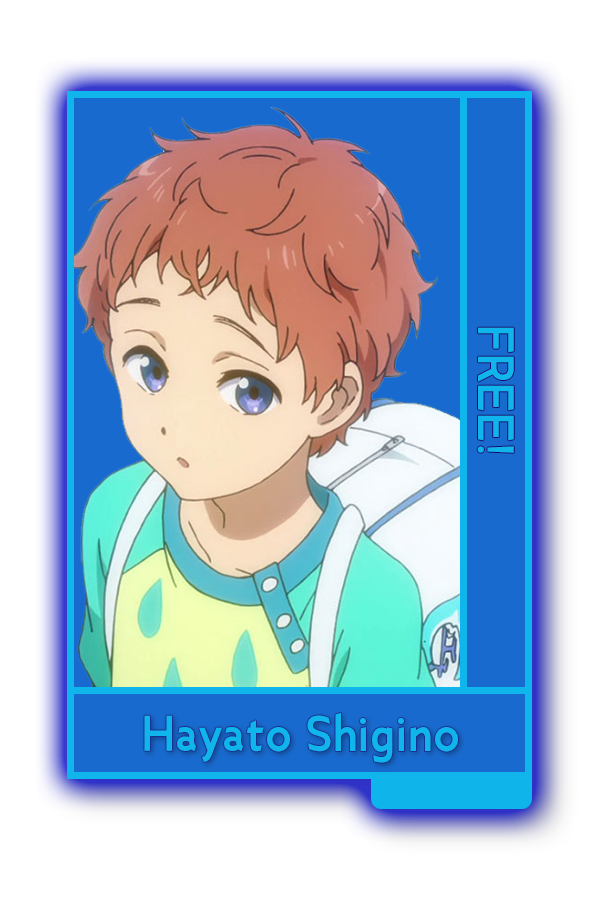
<style>
.page{position:relative;width:600px;height:900px;background:#ffffff}
.page>*{position:absolute;margin:0}
.t1{font:47.8px "Ancillary-Bold";color:#0fb5eb}
.t2{font:46.7px "Ancillary-Bold";color:#0fb5eb}
</style>
<div class="page">
<p class="t1" style="left:477px;top:327px;width:37px;height:126px;rotate:90deg">FREE!</p>
<p class="t2" style="left:144px;top:713px;width:314px;height:50px">Hayato Shigino</p>
</div>
